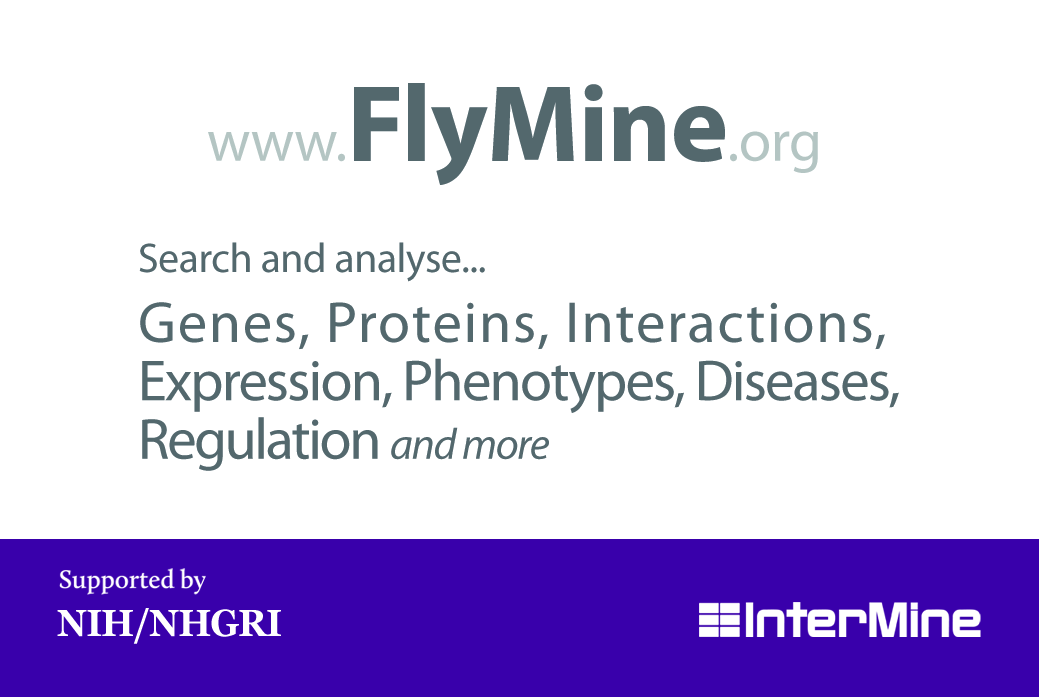
<style>
.page{position:relative;width:1039px;height:697px;background:#ffffff}
.page>*{position:absolute;margin:0}
.t1{font:109.3px "MyriadPro-Bold";letter-spacing:-0.01em;color:#53686d}
.t2{font:59.1px "MyriadPro-Regular";letter-spacing:-0.01em;color:#b3c5c3}
.t3{font:41.7px "MyriadPro-Regular";letter-spacing:-0.01em;color:#53686d}
.t4{font:58.3px/58.3px "MyriadPro-Regular";letter-spacing:-0.03em;color:#53686d}
.t5{font:58.3px/58.3px "MyriadPro-Regular";letter-spacing:0.03em;color:#53686d}
.t6{font:58.3px/58.3px "MyriadPro-Regular";letter-spacing:-0.04em;color:#53686d}
.t7{font:43.8px/58.3px "MyriadPro-It";letter-spacing:-0.03em;color:#53686d}
.t8{font:37.5px "Georgia-Bold";letter-spacing:-0.02em;color:#ffffff;scale:0.95 1}
</style>
<div class="page">
<p class="t1" style="left:208px;top:83px;width:610px;height:102px"><span class="t2">www.</span>FlyMine<span class="t2">.org</span></p>
<p class="t3" style="left:139px;top:242px;width:346px;height:40px">Search and analyse...</p>
<p class="t4" style="left:140px;top:302px;width:759px;height:169px"><span class="t5">Genes, Proteins, Interactions,<br></span>Expression, Phenotypes, Diseases,<br><span class="t6">Regulation </span><span class="t7">and more</span></p>
<p class="t8" style="left:57px;top:608px;width:224px;height:36px">NIH/NHGRI</p>
</div>
